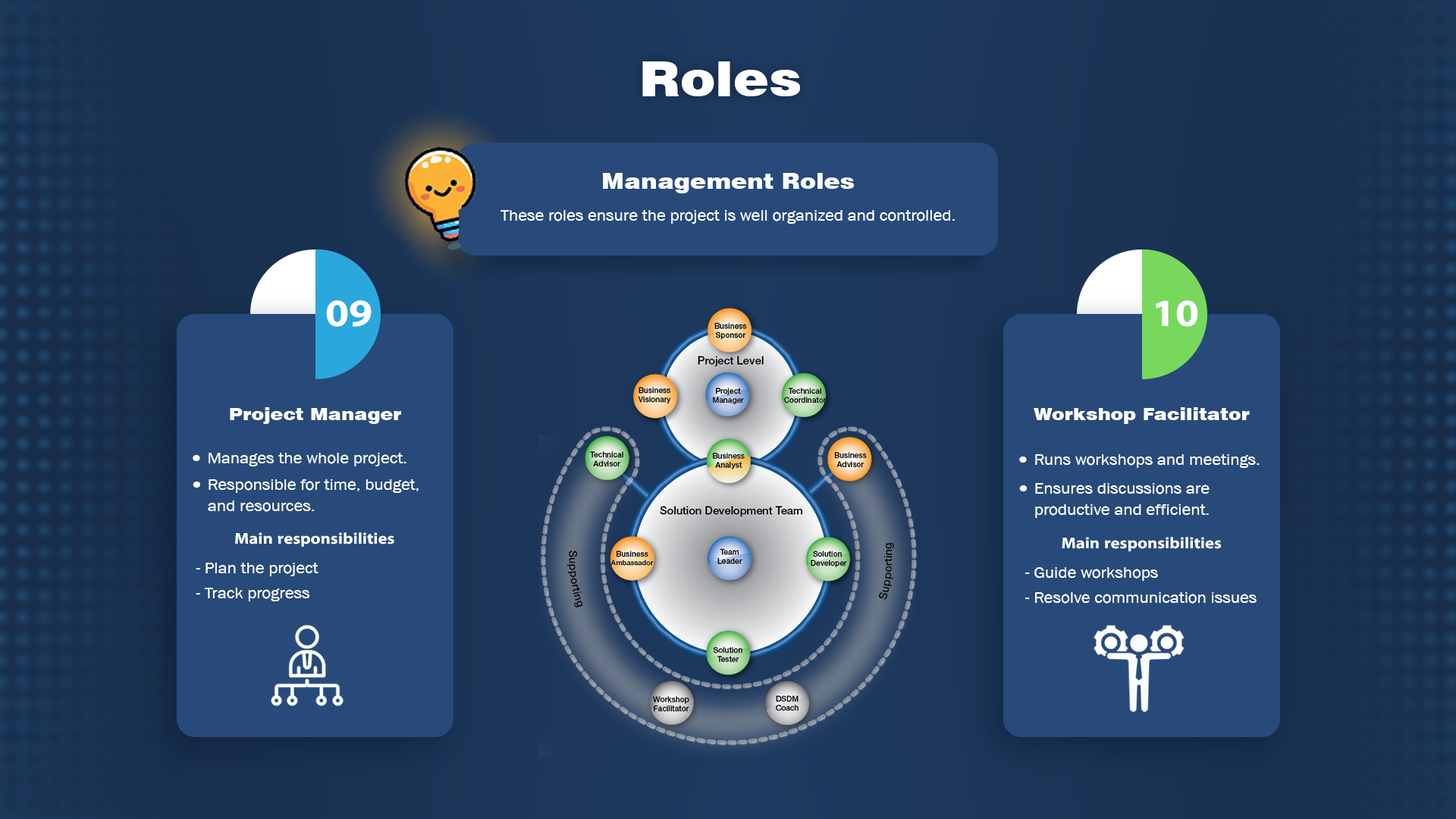
<style>
.page{position:relative;width:1456px;height:819px}
.page>*{position:absolute;margin:0}
.t1{font:48.5px "Swiss721BT-Black";color:#ffffff;scale:1.1 1}
.t2{font:21.9px "Swiss721BT-Black";color:#fafbfc;scale:1.1 1}
.t3{font:15.7px "AA-Khmer-AngDaunPov";color:#ffffff;scale:1.1 1}
.t4{font:38.8px "iKampuchea001_O'Chrov";color:#ffffff;scale:1.1 1}
.t5{font:17.3px "Swiss721BT-Black";color:#fafbfc;scale:1.1 1}
.t6{font:15.7px/21.3px "AA-Khmer-AngDaunPov";color:#ffffff;scale:1.1 1}
.t7{font:15.7px "iKampuchea001_O'Chrov";color:#ffffff;scale:1.1 1}
</style>
<div class="page">
<p class="t1" style="left:642px;top:61px;width:158px;height:35px">Roles</p>
<p class="t2" style="left:603px;top:173px;width:251px;height:20px">Management Roles</p>
<p class="t3" style="left:500px;top:210px;width:455px;height:14px">These roles ensure the project is well organized and controlled.</p>
<p class="t4" style="left:326px;top:300px;width:46px;height:27px">09</p>
<p class="t4" style="left:1155px;top:300px;width:43px;height:27px">10</p>
<p class="t5" style="left:230px;top:407px;width:171px;height:17px">Project Manager</p>
<p class="t5" style="left:1034px;top:407px;width:216px;height:17px">Workshop Facilitator</p>
<p class="t3" style="left:209px;top:453px;width:197px;height:13px">Manages the whole project.</p>
<p class="t3" style="left:1035px;top:454px;width:225px;height:14px">Runs workshops and meetings.</p>
<p class="t6" style="left:208px;top:479px;width:211px;height:33px">Responsible for time, budget, <br>and resources.</p>
<p class="t6" style="left:1035px;top:483px;width:175px;height:35px">Ensures discussions are <br>productive and efficient.</p>
<p class="t7" style="left:235px;top:532px;width:159px;height:15px">Main responsibilities</p>
<p class="t7" style="left:1062px;top:537px;width:160px;height:14px">Main responsibilities</p>
<p class="t3" style="left:196px;top:563px;width:122px;height:13px">- Plan the project</p>
<p class="t3" style="left:1025px;top:567px;width:133px;height:14px">- Guide workshops</p>
<p class="t3" style="left:196px;top:588px;width:113px;height:13px">- Track progress</p>
<p class="t3" style="left:1025px;top:592px;width:232px;height:12px">- Resolve communication issues</p>
</div>
